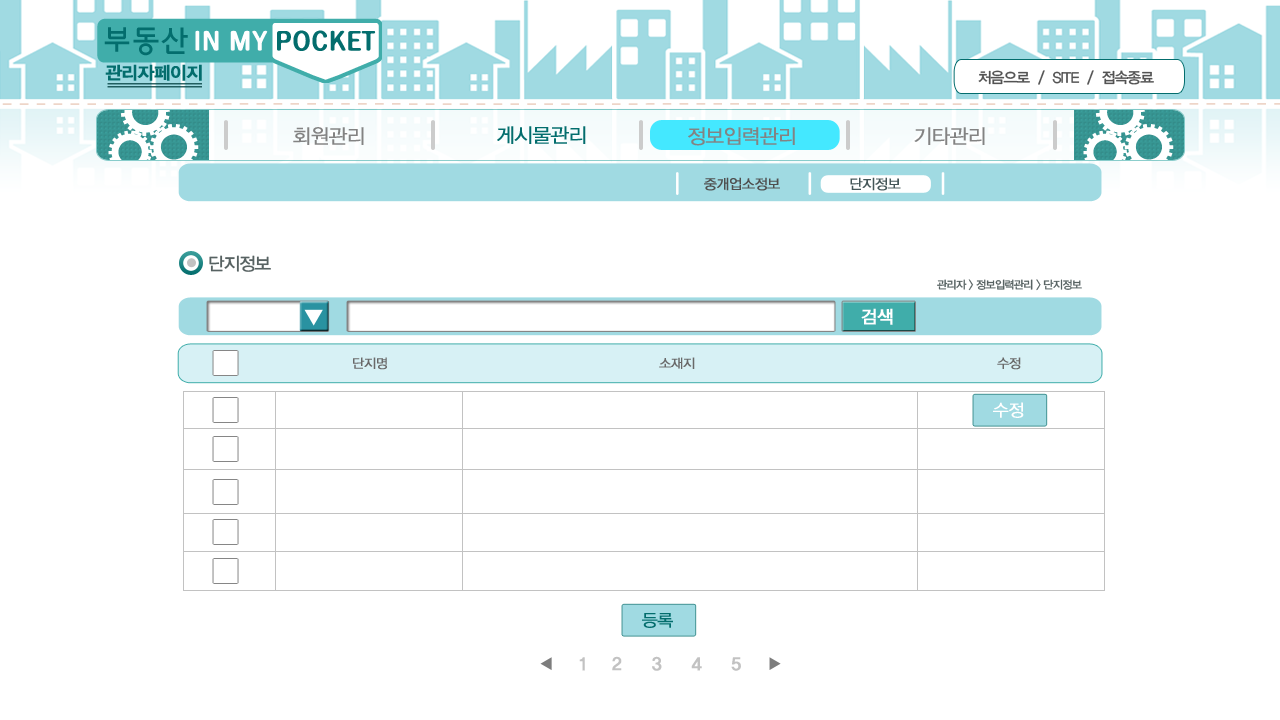
<style>
.page{position:relative;width:1280px;height:720px;background:#ffffff}
.page>*{position:absolute;margin:0}
.t1{font:17.8px "YDIYGO340";letter-spacing:-0.04em;color:#036d6d;font-weight:bold}
.t2{font:15px "YDIYGO330";letter-spacing:-0.06em;color:#535353}
.t3{font:20px "YDIYGO320";letter-spacing:-0.04em;color:#036d6d;font-weight:bold}
.t4{font:20px "YDIYGO320";letter-spacing:-0.04em;color:#838383;font-weight:bold}
.t5{font:14px "YDIYGO320";letter-spacing:-0.04em;color:#4f4f4f;font-weight:bold}
.t6{font:14px "YDIYGO320";letter-spacing:-0.04em;color:#445658;font-weight:bold}
.t7{font:18px "YDIYGO330";letter-spacing:-0.06em;color:#576262}
.t8{font:11px "YDIYGO330";letter-spacing:-0.06em;color:#576262}
.t9{font:17.8px "YDIYGO330";letter-spacing:-0.04em;color:#ffffff;font-weight:bold}
.t10{font:13px "YDIYGO320";letter-spacing:-0.04em;color:#696969;font-weight:bold}
.t11{font:17px "YDIYGO320";letter-spacing:-0.04em;color:#ffffff;font-weight:bold}
.t12{font:17px "YDIYGO320";letter-spacing:-0.04em;color:#036d6d;font-weight:bold}
.t13{font:17.8px "YDIYGO340";letter-spacing:-0.04em;color:#c2c2c2;font-weight:bold}
</style>
<div class="page">
<p class="t1" style="left:105px;top:64px;width:97px;height:17px">관리자페이지</p>
<p class="t2" style="left:978px;top:70px;width:176px;height:15px">처음으로  /  SITE  /  접속종료</p>
<p class="t3" style="left:497px;top:126px;width:89px;height:18px">게시물관리</p>
<p class="t4" style="left:293px;top:127px;width:71px;height:18px">회원관리</p>
<p class="t4" style="left:688px;top:127px;width:107px;height:19px">정보입력관리</p>
<p class="t4" style="left:914px;top:127px;width:71px;height:18px">기타관리</p>
<p class="t5" style="left:704px;top:177px;width:76px;height:14px">중개업소정보</p>
<p class="t6" style="left:850px;top:177px;width:51px;height:14px">단지정보</p>
<p class="t7" style="left:209px;top:255px;width:62px;height:17px">단지정보</p>
<p class="t8" style="left:937px;top:279px;width:145px;height:12px">관리자 &gt; 정보입력관리 &gt; 단지정보</p>
<p class="t9" style="left:861px;top:308px;width:32px;height:17px">검색</p>
<p class="t10" style="left:353px;top:357px;width:34px;height:13px">단지명</p>
<p class="t10" style="left:659px;top:357px;width:36px;height:12px">소재지</p>
<p class="t10" style="left:997px;top:357px;width:24px;height:13px">수정</p>
<p class="t11" style="left:993px;top:402px;width:31px;height:16px">수정</p>
<p class="t12" style="left:642px;top:613px;width:31px;height:15px">등록</p>
<p class="t13" style="left:579px;top:656px;width:162px;height:15px">1    2     3     4     5</p>
</div>
